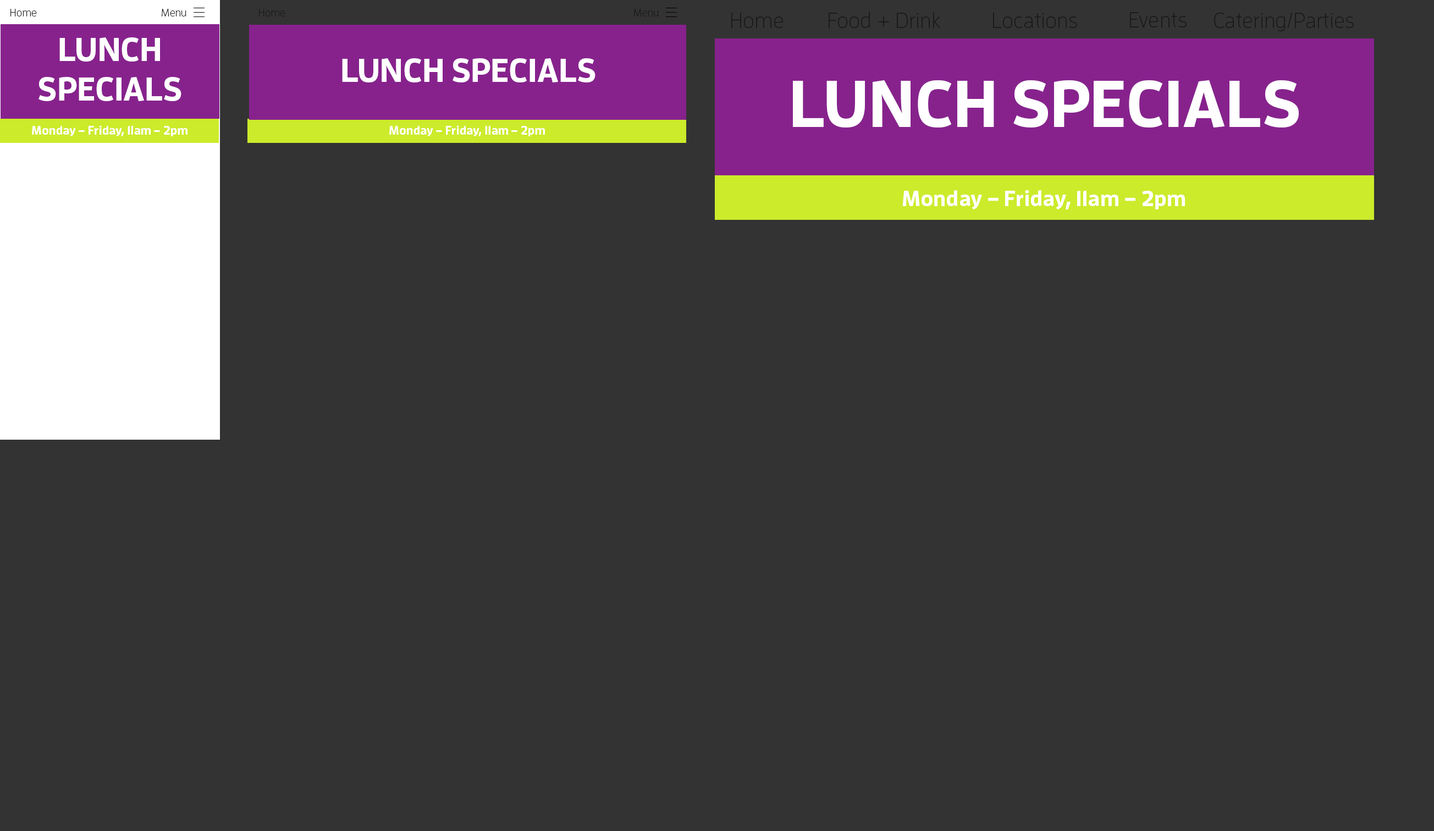
<style>
.page{position:relative;width:1434px;height:831px;background:#333333}
.page>*{position:absolute;margin:0}
.t1{font:11px "EnzoOT-Light";color:#191919}
.t2{font:22px "EnzoOT-Light";color:#191919}
.t3{font:33px "EnzoOT-Bold";color:#ffffff}
.t4{font:66px "EnzoOT-Bold";color:#ffffff}
.t5{font:12.1px "EnzoOT-Bold";color:#ffffff}
.t6{font:22px "EnzoOT-Bold";color:#ffffff}
</style>
<div class="page">
<p class="t1" style="left:10px;top:9px;width:27px;height:7px">Home</p>
<p class="t1" style="left:162px;top:9px;width:24px;height:7px">Menu</p>
<p class="t1" style="left:259px;top:9px;width:26px;height:7px">Home</p>
<p class="t1" style="left:634px;top:9px;width:25px;height:7px">Menu</p>
<p class="t2" style="left:731px;top:13px;width:52px;height:15px">Home</p>
<p class="t2" style="left:829px;top:12px;width:112px;height:16px">Food + Drink</p>
<p class="t2" style="left:993px;top:13px;width:84px;height:15px">Locations</p>
<p class="t2" style="left:1130px;top:12px;width:57px;height:15px">Events</p>
<p class="t2" style="left:1214px;top:13px;width:140px;height:18px">Catering/Parties</p>
<p class="t3" style="left:38px;top:37px;width:143px;height:64px;text-align:center">LUNCH<br>SPECIALS</p>
<p class="t3" style="left:342px;top:58px;width:254px;height:24px">LUNCH SPECIALS</p>
<p class="t4" style="left:793px;top:80px;width:506px;height:48px">LUNCH SPECIALS</p>
<p class="t5" style="left:32px;top:125px;width:156px;height:11px">Monday – Friday, 11am – 2pm</p>
<p class="t5" style="left:389px;top:125px;width:156px;height:11px">Monday – Friday, 11am – 2pm</p>
<p class="t6" style="left:902px;top:190px;width:283px;height:20px">Monday – Friday, 11am – 2pm</p>
</div>
